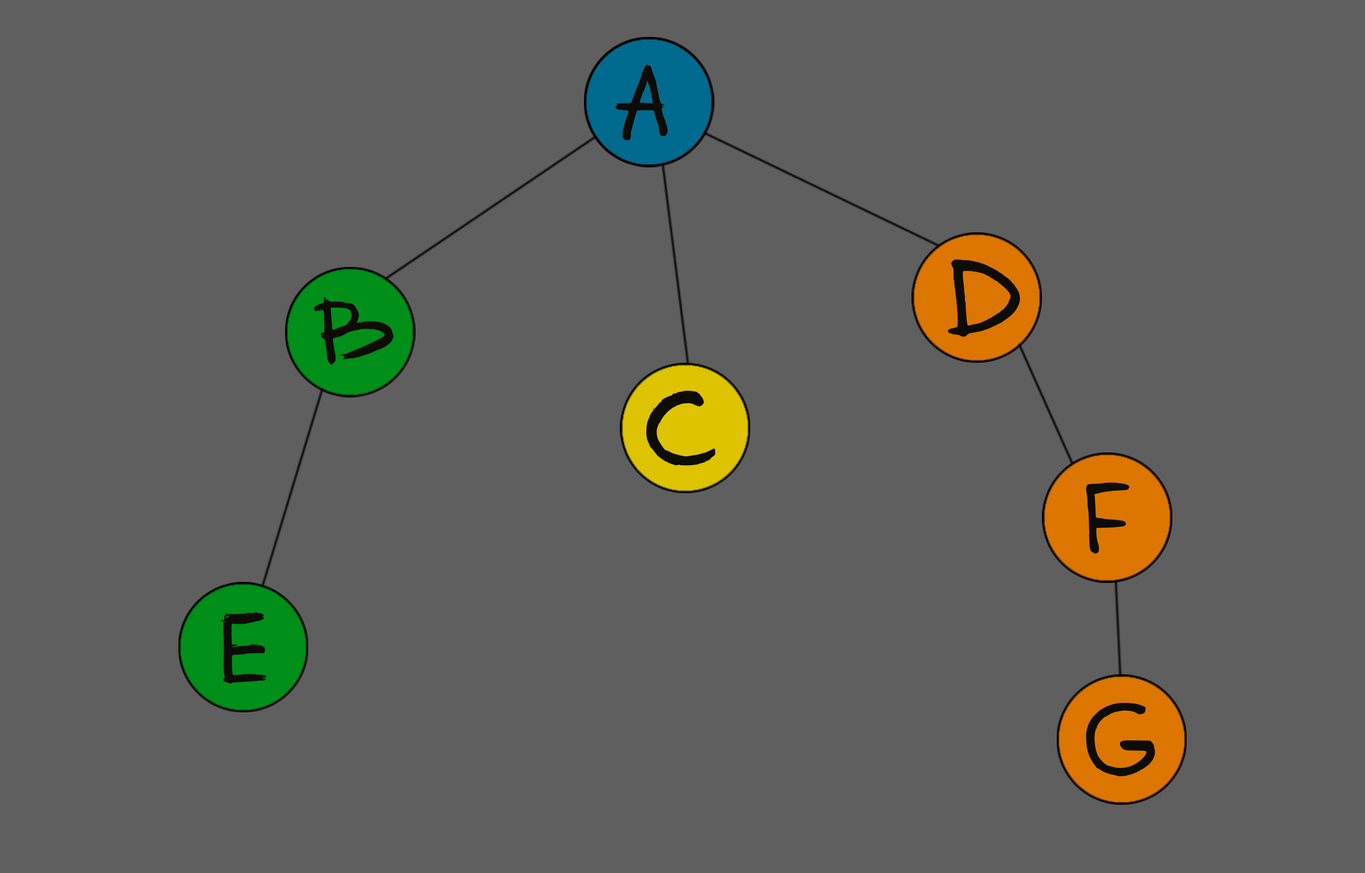
<style>
.page{position:relative;width:1365px;height:873px;background:#5f5f5f}
.page>*{position:absolute;margin:0}
.t1{font:86.7px "Solidus66_eng-Regular";color:#0d0c06}
.t2{font:90.2px "Solidus66_eng-Regular";color:#0d0c06}
</style>
<div class="page">
<p class="t1" style="left:615px;top:64px;width:53px;height:78px">A</p>
<p class="t2" style="left:948px;top:259px;width:73px;height:78px">D</p>
<p class="t2" style="left:314px;top:297px;width:80px;height:68px">B</p>
<p class="t2" style="left:646px;top:390px;width:70px;height:76px">C</p>
<p class="t2" style="left:1086px;top:482px;width:44px;height:72px">f</p>
<p class="t2" style="left:221px;top:612px;width:45px;height:72px">e</p>
<p class="t2" style="left:1086px;top:703px;width:70px;height:74px">g</p>
</div>
